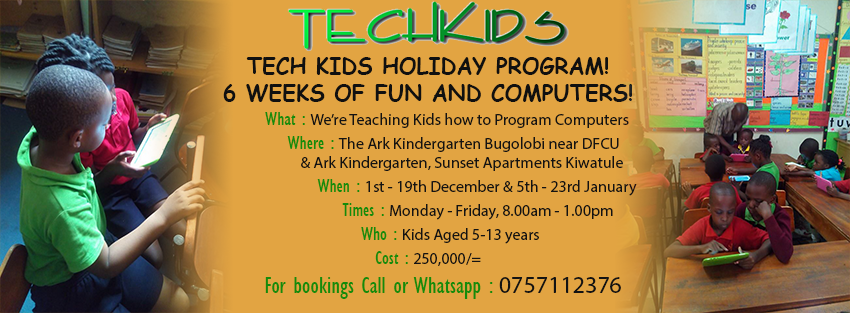
<style>
.page{position:relative;width:850px;height:313px;background:#e2a442}
.page>*{position:absolute;margin:0}
.t1{font:16px "MyriadPro-Regular";color:#131313}
.t2{font:22px "ComicSansMS-Bold";color:#101010}
.t3{font:20px "GillSansMT-Condensed";color:#148b0b}
.t4{font:24px "GillSansMT-Condensed";color:#148b0b}
.t5{font:24px "MyriadPro-Regular";color:#131313}
</style>
<div class="page">
<p class="t1" style="left:223px;top:57px;width:414px;height:242px;text-align:center"><span class="t2">TECH KIDS HOLIDAY PROGRAM! <br>6 WEEKS OF FUN AND COMPUTERS!<br></span><span class="t3">      What : </span>We’re Teaching Kids how to Program Computers<br>        <span class="t3">Where : </span>The Ark Kindergarten Bugolobi near DFCU<br>                    &amp; Ark Kindergarten, Sunset Apartments Kiwatule    <br>            <span class="t3">   When : </span>1st - 19th December &amp; 5th - 23rd January<br>              <span class="t3"> Times : </span>Monday - Friday, 8.00am - 1.00pm <br><span class="t3">       Who : </span>Kids Aged 5-13 years<br><span class="t3">Cost : </span>250,000/=<br>  <span class="t4">  For bookings Call or Whatsapp : </span><span class="t5">0757112376</span></p>
</div>
